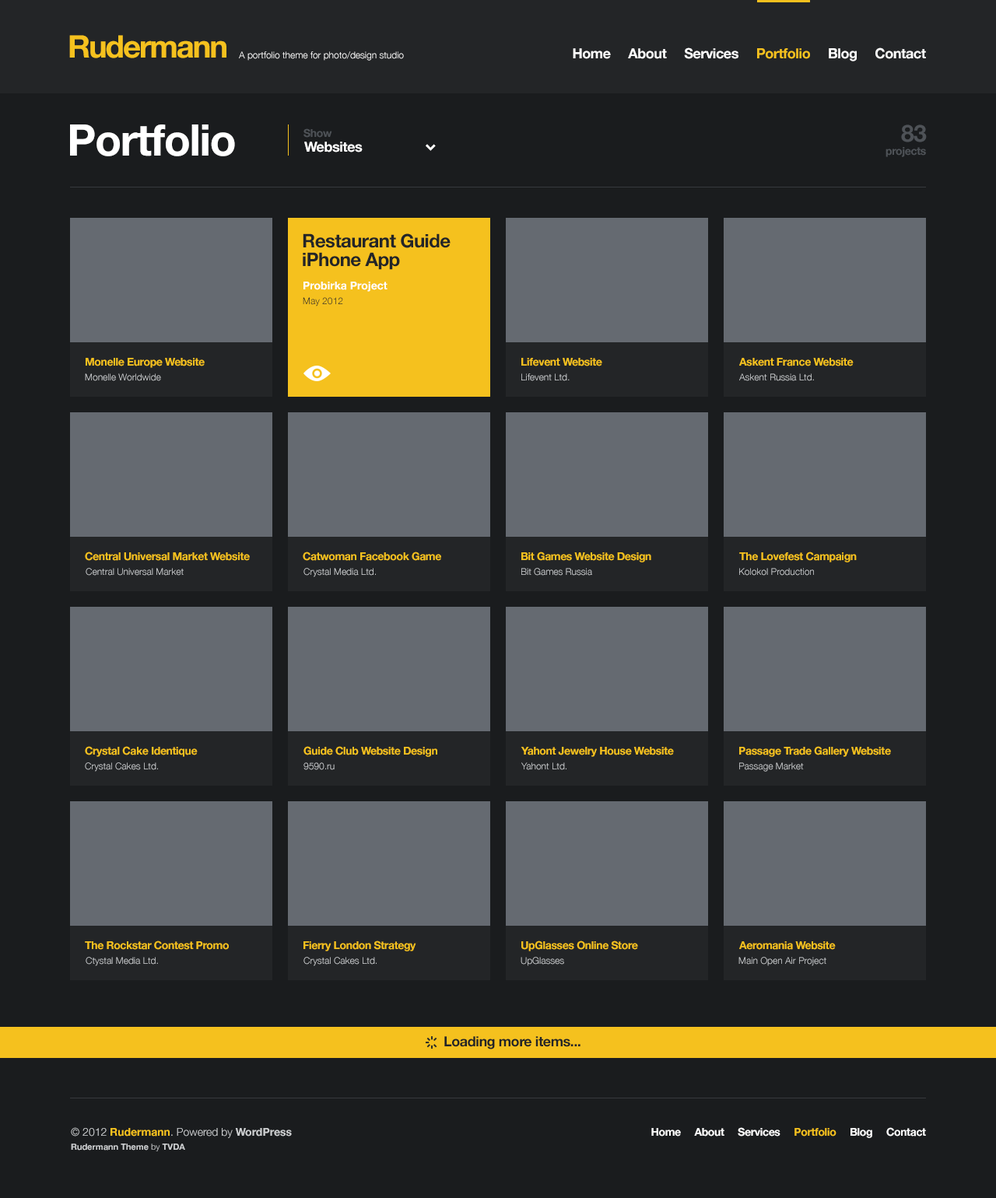
<style>
.page{position:relative;width:996px;height:1198px;background:#1a1c1e}
.page>*{position:absolute;margin:0}
.t1{font:31.1px "HelveticaNeue-Bold";letter-spacing:-0.05em;color:#f5c11e}
.t2{font:9.3px "HelveticaNeue-Light";color:#ffffff}
.t3{font:14px "HelveticaNeue-Bold";letter-spacing:-0.025em;color:#ffffff}
.t4{font:14px "HelveticaNeue-Bold";letter-spacing:-0.025em;color:#f5c11e}
.t5{font:43.6px "HelveticaNeue-Bold";letter-spacing:-0.025em;color:#ffffff}
.t6{font:23.3px "HelveticaNeue-Bold";letter-spacing:-0.025em;color:#4e5257}
.t7{font:10.9px "HelveticaNeue-Bold";letter-spacing:-0.025em;color:#4e5257}
.t8{font:18.7px/18.7px "HelveticaNeue-Bold";letter-spacing:-0.025em;color:#232527}
.t9{font:10.9px "HelveticaNeue-Bold";color:#ffffff}
.t10{font:9.3px "HelveticaNeue-Light";color:#232527}
.t11{font:10.9px "HelveticaNeue-Bold";letter-spacing:-0.025em;color:#f5c11e}
.t12{font:9.3px "HelveticaNeue-Light";color:#ccced0}
.t13{font:14px "HelveticaNeue-Bold";letter-spacing:-0.025em;color:#232527}
.t14{font:8.6px/14px "HelveticaNeue-Bold";color:#ccced0}
.t15{font:10.9px/14px "HelveticaNeue-Light";color:#ccced0}
.t16{font:10.9px/14px "HelveticaNeue-Bold";color:#f5c11e}
.t17{font:10.9px/14px "HelveticaNeue-Bold";color:#ccced0}
.t18{font:8.6px/14px "HelveticaNeue-Light";color:#ccced0}
.t19{font:10.9px "HelveticaNeue-Bold";letter-spacing:-0.025em;color:#ffffff}
</style>
<div class="page">
<p class="t1" style="left:69px;top:35px;width:157px;height:23px">Rudermann</p>
<p class="t2" style="left:239px;top:51px;width:165px;height:10px">A portfolio theme for photo/design studio</p>
<p class="t3" style="left:572px;top:47px;width:354px;height:14px">Home     About     Services     <span class="t4">Portfolio     </span>Blog     Contact</p>
<p class="t5" style="left:70px;top:124px;width:165px;height:32px">Portfolio</p>
<p class="t6" style="left:901px;top:124px;width:25px;height:18px">83</p>
<p class="t7" style="left:303px;top:128px;width:29px;height:10px">Show</p>
<p class="t3" style="left:304px;top:142px;width:58px;height:10px">Websites</p>
<p class="t7" style="left:885px;top:147px;width:41px;height:10px">projects</p>
<p class="t8" style="left:303px;top:233px;width:147px;height:37px">Restaurant Guide<br>iPhone App</p>
<p class="t9" style="left:303px;top:282px;width:84px;height:10px">Probirka Project</p>
<p class="t10" style="left:303px;top:297px;width:40px;height:9px">May 2012</p>
<p class="t11" style="left:86px;top:358px;width:119px;height:10px">Monelle Europe Website</p>
<p class="t11" style="left:521px;top:358px;width:81px;height:8px">Lifevent Website</p>
<p class="t11" style="left:739px;top:358px;width:114px;height:8px">Askent France Website</p>
<p class="t12" style="left:85px;top:373px;width:76px;height:8px">Monelle Worldwide</p>
<p class="t12" style="left:521px;top:373px;width:48px;height:8px">Lifevent Ltd.</p>
<p class="t12" style="left:739px;top:373px;width:75px;height:8px">Askent Russia Ltd.</p>
<p class="t11" style="left:85px;top:551px;width:165px;height:10px">Central Universal Market Website</p>
<p class="t11" style="left:303px;top:551px;width:138px;height:10px">Catwoman Facebook Game</p>
<p class="t11" style="left:521px;top:551px;width:130px;height:11px">Bit Games Website Design</p>
<p class="t11" style="left:739px;top:551px;width:117px;height:11px">The Lovefest Campaign</p>
<p class="t12" style="left:86px;top:568px;width:98px;height:8px">Central Universal Market</p>
<p class="t12" style="left:303px;top:568px;width:73px;height:9px">Crystal Media Ltd.</p>
<p class="t12" style="left:521px;top:568px;width:71px;height:8px">Bit Games Russia</p>
<p class="t12" style="left:739px;top:568px;width:75px;height:8px">Kolokol Production</p>
<p class="t11" style="left:85px;top:746px;width:113px;height:11px">Crystal Cake Identique</p>
<p class="t11" style="left:303px;top:746px;width:134px;height:11px">Guide Club Website Design</p>
<p class="t11" style="left:520px;top:747px;width:154px;height:10px">Yahont Jewelry House Website</p>
<p class="t11" style="left:739px;top:746px;width:152px;height:11px">Passage Trade Gallery Website</p>
<p class="t12" style="left:85px;top:762px;width:73px;height:10px">Crystal Cakes Ltd.</p>
<p class="t12" style="left:303px;top:762px;width:31px;height:8px">9590.ru</p>
<p class="t12" style="left:521px;top:762px;width:45px;height:8px">Yahont Ltd.</p>
<p class="t12" style="left:739px;top:762px;width:64px;height:10px">Passage Market</p>
<p class="t11" style="left:85px;top:940px;width:144px;height:10px">The Rockstar Contest Promo</p>
<p class="t11" style="left:303px;top:940px;width:113px;height:11px">Fierry London Strategy</p>
<p class="t11" style="left:521px;top:940px;width:117px;height:11px">UpGlasses Online Store</p>
<p class="t11" style="left:739px;top:941px;width:96px;height:9px">Aeromania Website</p>
<p class="t12" style="left:86px;top:957px;width:72px;height:9px">Ctystal Media Ltd.</p>
<p class="t12" style="left:303px;top:957px;width:73px;height:9px">Crystal Cakes Ltd.</p>
<p class="t12" style="left:520px;top:957px;width:44px;height:9px">UpGlasses</p>
<p class="t12" style="left:738px;top:957px;width:88px;height:9px">Main Open Air Project</p>
<p class="t13" style="left:444px;top:1036px;width:136px;height:13px">Loading more items...</p>
<p class="t14" style="left:71px;top:1127px;width:221px;height:24px"><span class="t15">© 2012 </span><span class="t16">Rudermann</span><span class="t15">. Powered by </span><span class="t17">WordPress<br></span>Rudermann Theme<span class="t18"> by </span>TVDA</p>
<p class="t19" style="left:651px;top:1127px;width:275px;height:11px">Home     About     Services     <span class="t11">Portfolio</span>     Blog     Contact</p>
</div>
